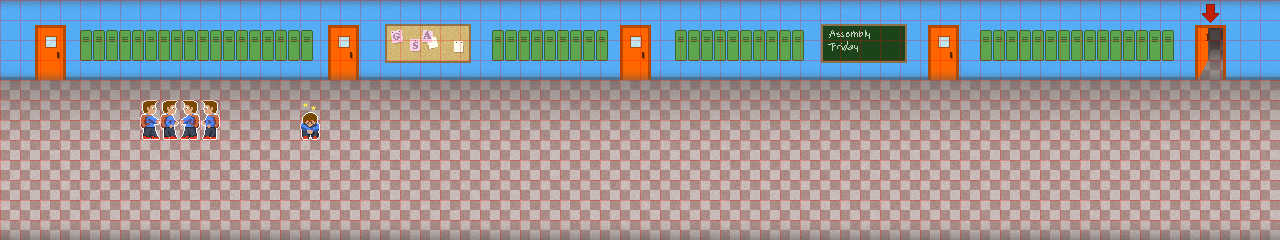
<style>
.page{position:relative;width:1280px;height:240px}
.page>*{position:absolute;margin:0}
.t1{font:11px "Lindsey";color:#c0d3be}
</style>
<div class="page">
<p class="t1" style="left:828px;top:30px;width:42px;height:22px;text-align:justify">Assembly<br>Friday</p>
</div>
